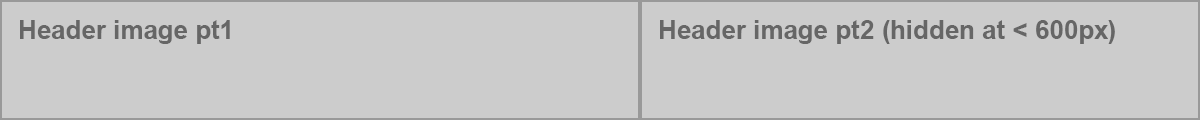
<style>
.page{position:relative;width:1200px;height:120px;background:#cccccc}
.page>*{position:absolute;margin:0}
.t1{font:26px "Arial-BoldMT";color:#666666}
</style>
<div class="page">
<p class="t1" style="left:20px;top:20px;width:210px;height:24px">Header image pt1</p>
<p class="t1" style="left:660px;top:20px;width:455px;height:24px">Header image pt2 (hidden at &lt; 600px)</p>
</div>
